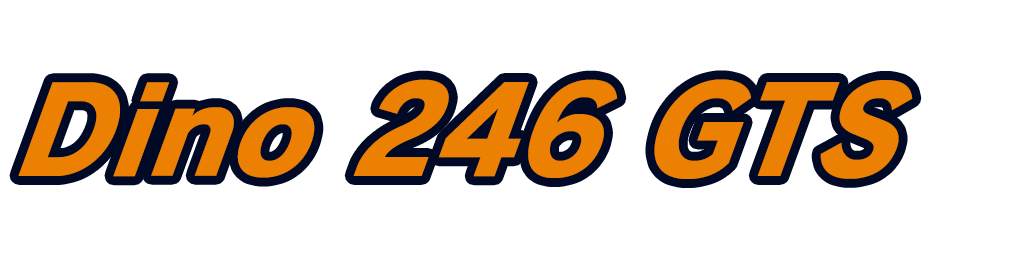
<style>
.page{position:relative;width:1024px;height:256px;background:#ffffff}
.page>*{position:absolute;margin:0}
.t1{font:128px "RodinPro-EB";letter-spacing:0.001em;color:#ec8002;scale:0.94 1}
</style>
<div class="page">
<p class="t1" style="left:18px;top:79px;width:895px;height:100px">Dino 246 GTS</p>
</div>
